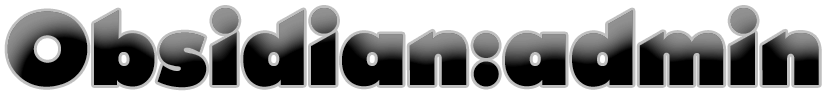
<style>
.page{position:relative;width:831px;height:93px;background:#ffffff}
.page>*{position:absolute;margin:0}
.t1{font:100px "OpineHeavy"}
</style>
<div class="page">
<p class="t1" style="left:7px;top:8px;width:812px;height:80px">Obsidian:admin</p>
<p class="t1" style="left:7px;top:8px;width:812px;height:80px">Obsidian:admin</p>
<p class="t1" style="left:7px;top:8px;width:812px;height:80px">Obsidian:admin</p>
</div>
